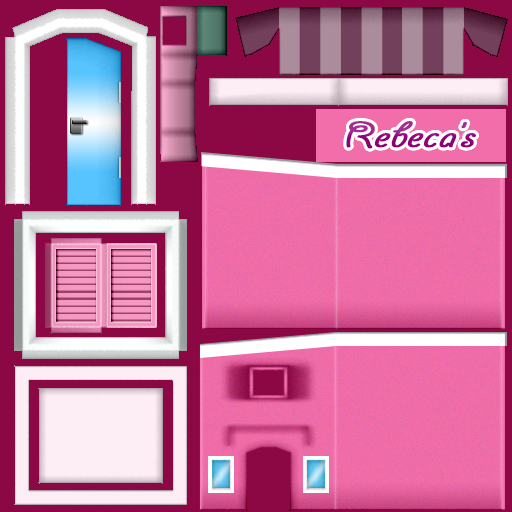
<style>
.page{position:relative;width:512px;height:512px;background:#8b0844}
.page>*{position:absolute;margin:0}
.t1{font:41px "GiddyupStd";color:#90007c;font-weight:bold;scale:1.17 1}
</style>
<div class="page">
<p class="t1" style="left:346px;top:121px;width:130px;height:28px">Rebeca’s</p>
</div>
